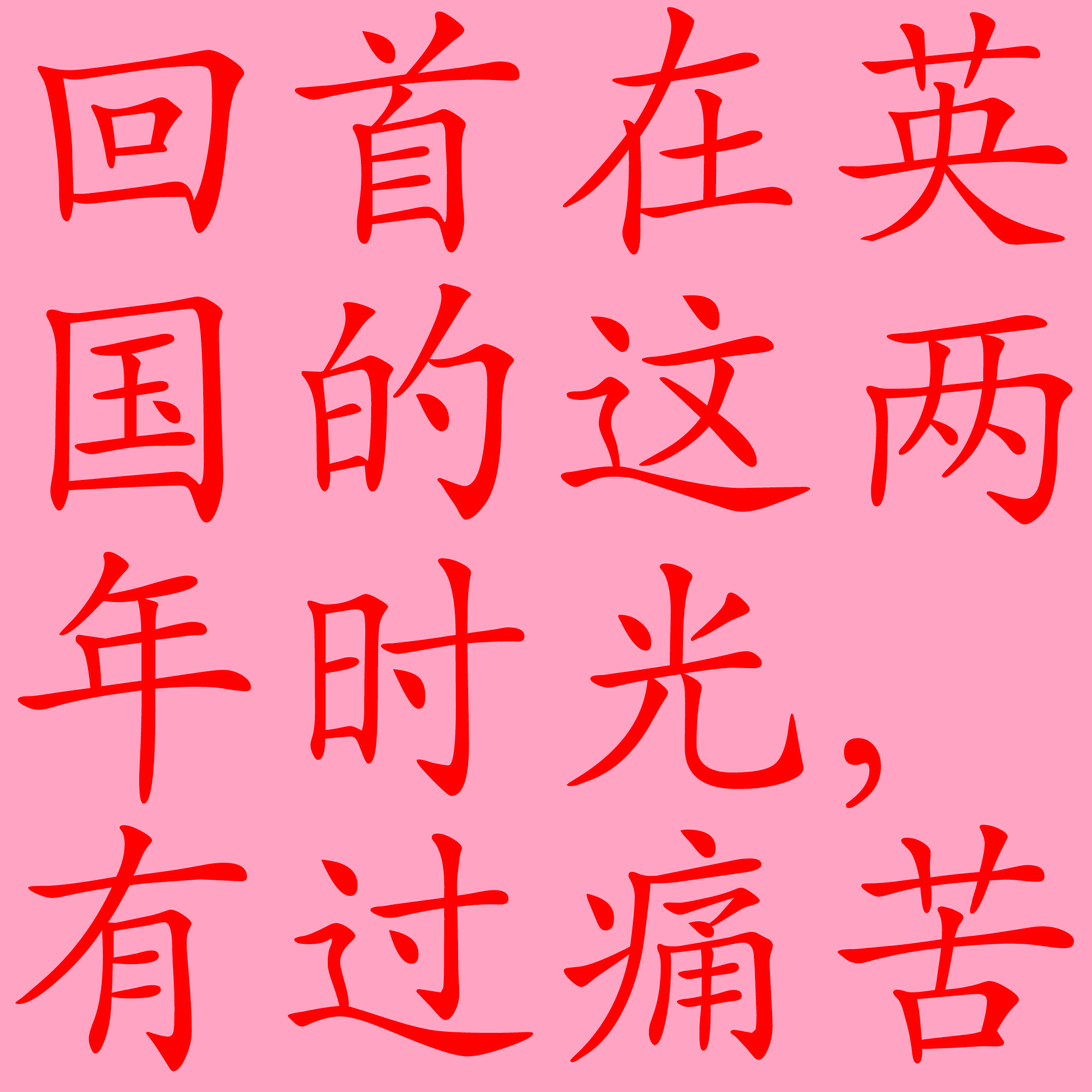
<style>
.page{position:relative;width:1092px;height:1092px;background:#ffa5c3}
.page>*{position:absolute;margin:0}
.t1{font:266.6px/271.9px "SIL-Kai-Reg-Jian";letter-spacing:0.025em;color:#ff0000}
</style>
<div class="page">
<p class="t1" style="left:15px;top:7px;width:1059px;height:1064px">回首在英<br>国的这两<br>年时光，<br>有过痛苦</p>
</div>
